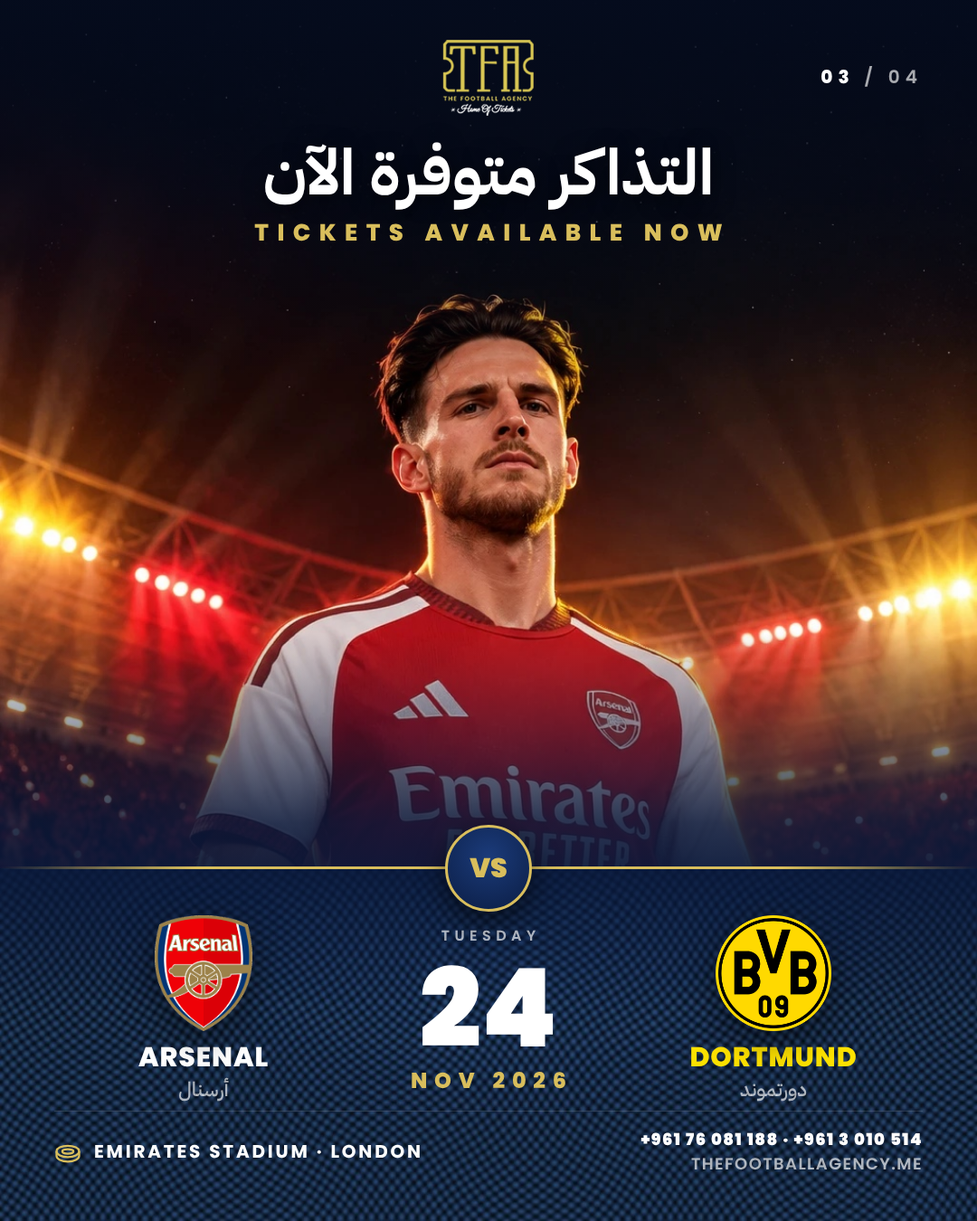
<style>
.page{position:relative;width:977px;height:1221px}
.page>*{position:absolute;margin:0}
.t1{font:18.1px "Poppins-SemiBold";letter-spacing:0.3em;color:#ffffff}
.t2{font:18.1px "Poppins-ExtraBold";letter-spacing:0.3em;color:#ffffff}
.t3{font:63.3px/76px "IBMPlexSansArabic-Bold";color:#ffffff}
.t4{font:23.5px "Poppins-ExtraBold";letter-spacing:0.36em;color:#d9be5c}
.t5{font:27.1px "Poppins-Black";color:#d9be5c}
.t6{font:14.5px "Poppins-SemiBold";letter-spacing:0.34em}
.t7{font:108.5px "Poppins-Black";color:#ffffff}
.t8{font:27.1px "Poppins-ExtraBold";letter-spacing:0.03em;color:#ffffff}
.t9{font:27.1px "Poppins-ExtraBold";letter-spacing:0.03em;color:#fde100}
.t10{font:21.7px "Poppins-ExtraBold";letter-spacing:0.32em;color:#d9be5c}
.t11{font:19.9px "IBMPlexSansArabic-Medium"}
.t12{font:16.3px/24.4px "Poppins-Black";letter-spacing:0.08em;color:#ffffff}
.t13{font:16.3px/24.4px "Poppins-SemiBold";letter-spacing:0.08em;color:#ffffff}
.t14{font:18.1px "Poppins-Bold";letter-spacing:0.14em;color:#ffffff}
</style>
<div class="page">
<p class="t1" style="left:821px;top:66px;width:96px;height:21px"><span class="t2">03</span> / 04</p>
<p class="t3" style="left:240px;top:122px;width:496px;height:116px;text-align:center">التذاكر متوفرة الآن</p>
<p class="t4" style="left:254px;top:223px;width:468px;height:18px">TICKETS AVAILABLE NOW</p>
<p class="t5" style="left:469px;top:857px;width:37px;height:21px">VS</p>
<p class="t6" style="left:441px;top:930px;width:94px;height:11px">TUESDAY</p>
<p class="t7" style="left:421px;top:965px;width:132px;height:81px">24</p>
<p class="t8" style="left:138px;top:1046px;width:130px;height:21px">ARSENAL</p>
<p class="t9" style="left:691px;top:1046px;width:165px;height:21px">DORTMUND</p>
<p class="t10" style="left:411px;top:1072px;width:154px;height:17px">NOV 2026</p>
<p class="t11" style="left:179px;top:1077px;width:50px;height:25px">أرسنال</p>
<p class="t11" style="left:740px;top:1083px;width:67px;height:19px">دورتموند</p>
<p class="t12" style="left:640px;top:1132px;width:281px;height:38px;text-align:right">+961 76 081 188 · +961 3 010 514<span class="t13"><br>THEFOOTBALLAGENCY.ME</span></p>
<p class="t14" style="left:95px;top:1144px;width:325px;height:14px">EMIRATES STADIUM · LONDON</p>
</div>
